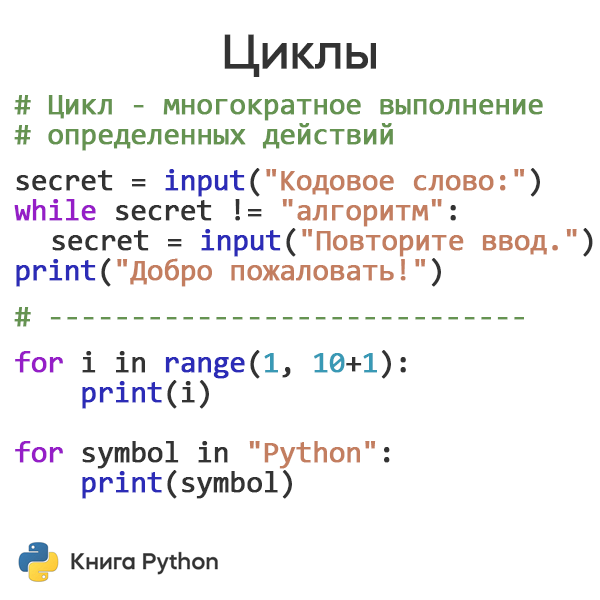
<style>
.page{position:relative;width:600px;height:600px;background:#ffffff}
.page>*{position:absolute;margin:0}
.t1{font:48px "MazzardH-Regular";letter-spacing:-0.025em;color:#333333;font-weight:bold}
.t2{font:30px/30px "Consolas";letter-spacing:-0.025em;color:#659351;font-weight:bold}
.t3{font:30px/30px "Consolas";letter-spacing:-0.025em;color:#333333;font-weight:bold}
.t4{font:30px/30px "Consolas";letter-spacing:-0.025em;color:#2c2cb7;font-weight:bold}
.t5{font:30px/30px "Consolas";letter-spacing:-0.025em;color:#c37e60;font-weight:bold}
.t6{font:30px/30px "Consolas";letter-spacing:-0.025em;color:#951ec7;font-weight:bold}
.t7{font:30px/30px "Consolas";letter-spacing:-0.025em;color:#3999b5;font-weight:bold}
</style>
<div class="page">
<p class="t1" style="left:224px;top:34px;width:152px;height:43px">Циклы</p>
<p class="t2" style="left:14px;top:95px;width:579px;height:404px"># Цикл - многократное выполнение<br># определенных действий<br><br><span class="t3">secret = </span><span class="t4">input</span><span class="t3">(</span><span class="t5">"Кодовое слово:"</span><span class="t3">)<br></span><span class="t6">while </span><span class="t3">secret != </span><span class="t5">"алгоритм"</span><span class="t3">:<br> secret = </span><span class="t4">input</span><span class="t3">(</span><span class="t5">"Повторите ввод."</span><span class="t3">)<br></span><span class="t4">print</span><span class="t3">(</span><span class="t5">"Добро пожаловать!"</span><span class="t3">)<br><br></span># -----------------------------<br><br><span class="t6">for </span><span class="t3">i in </span><span class="t4">range</span><span class="t3">(</span><span class="t7">1</span><span class="t3">, </span><span class="t7">10</span><span class="t3">+</span><span class="t7">1</span><span class="t3">):<br>    </span><span class="t4">print</span><span class="t3">(i)<br><br></span><span class="t6">for </span><span class="t3">symbol in </span><span class="t5">"Python"</span><span class="t3">:<br>    </span><span class="t4">print</span><span class="t3">(symbol)</span></p>
</div>
